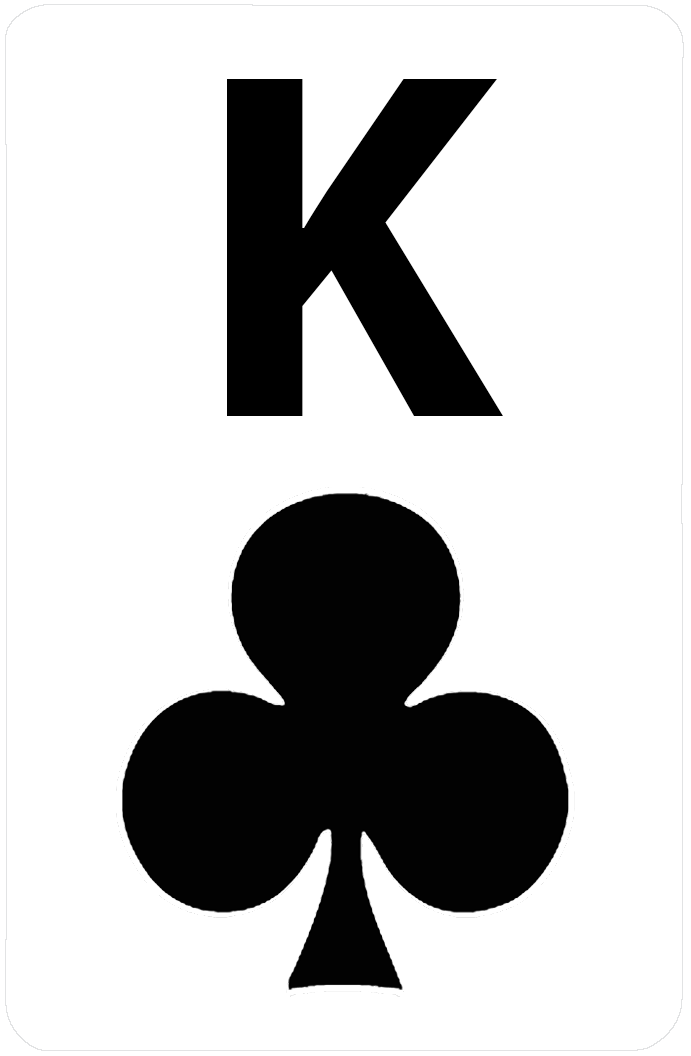
<style>
.page{position:relative;width:691px;height:1056px;background:#ffffff}
.page>*{position:absolute;margin:0}
.t1{font:500px "MyriadPro-Bold";color:#000000}
</style>
<div class="page">
<p class="t1" style="left:227px;top:79px;width:276px;height:337px">K</p>
</div>
